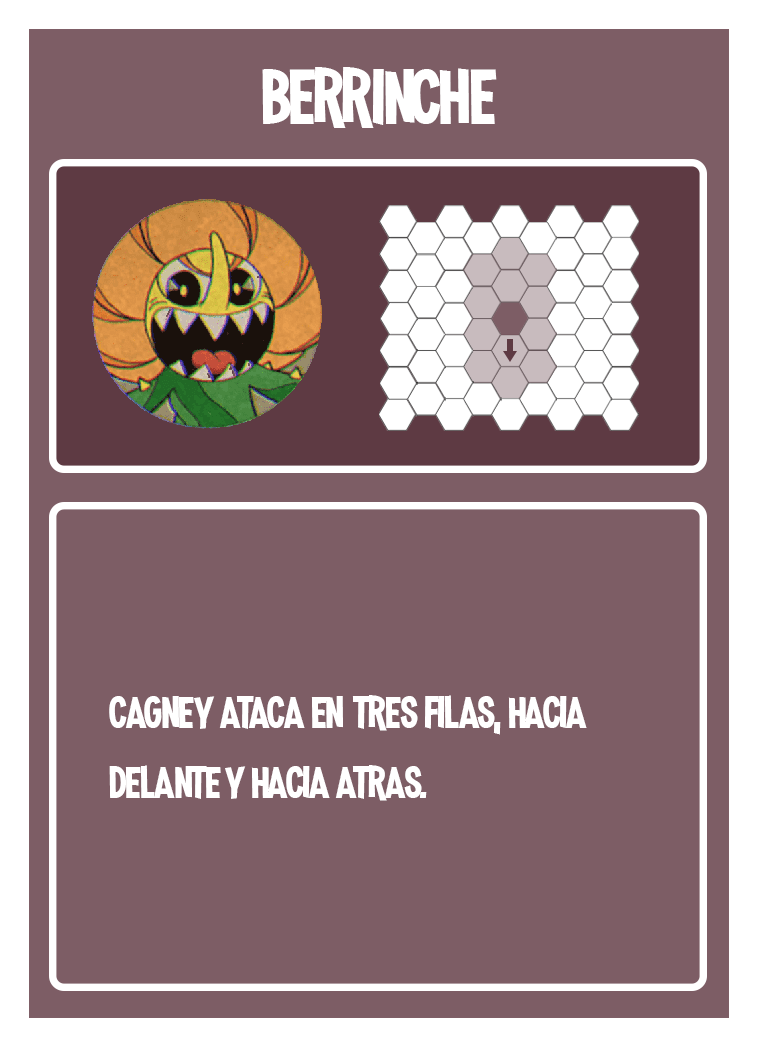
<style>
.page{position:relative;width:758px;height:1047px;background:#7d5d65}
.page>*{position:absolute;margin:0}
.t1{font:100px "MadnessHyperactive";color:#ffffff}
.t2{font:58.3px "MadnessHyperactive";color:#ffffff}
</style>
<div class="page">
<p class="t1" style="left:262px;top:67px;width:235px;height:61px">berrinche</p>
<p class="t2" style="left:109px;top:695px;width:478px;height:106px">cagney ataca en tres filas, hacia delante y hacia atras.</p>
</div>
